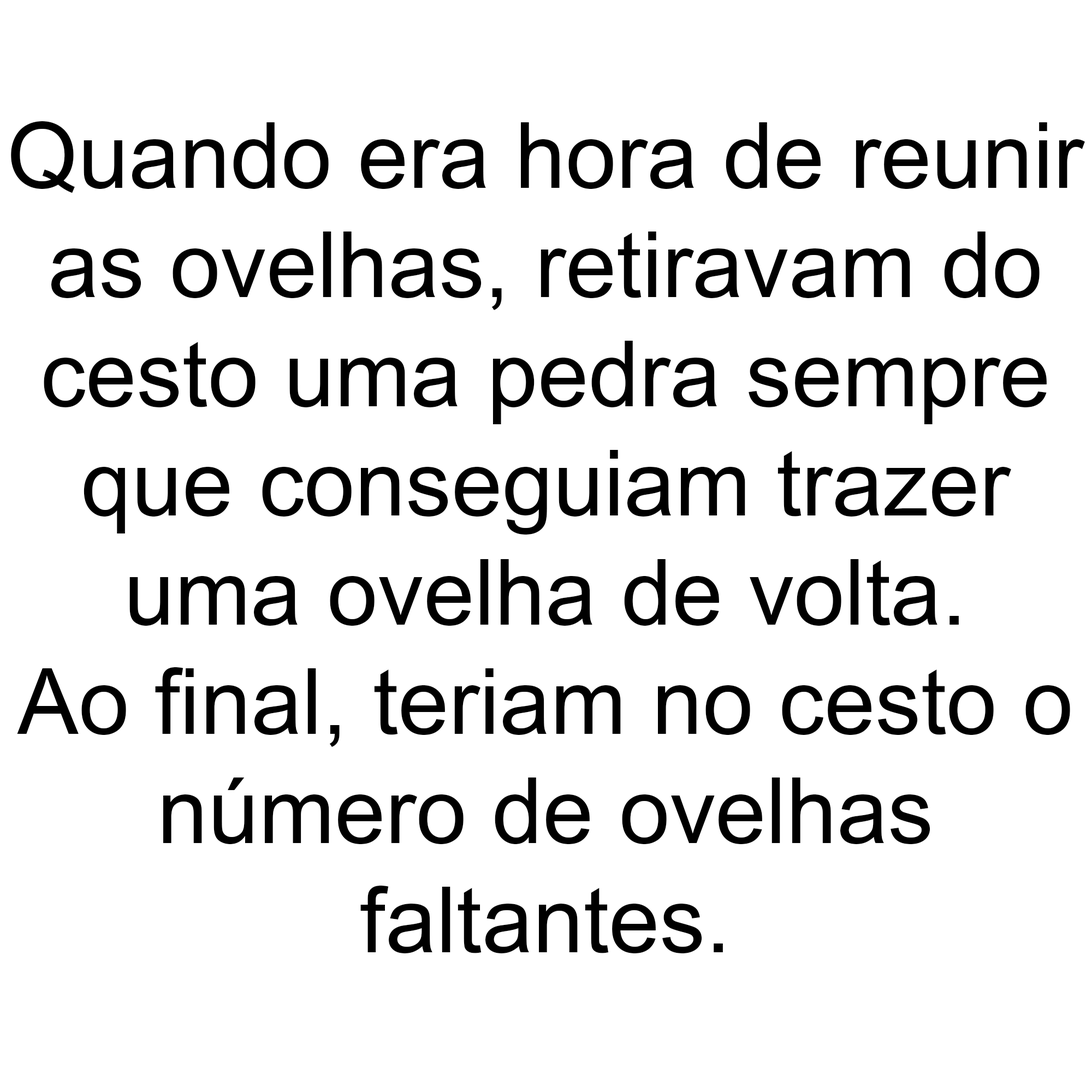
<style>
.page{position:relative;width:1092px;height:1092px;background:#ffffff}
.page>*{position:absolute;margin:0}
.t1{font:91px "ArialMT";color:#000000}
</style>
<div class="page">
<p class="t1" style="left:11px;top:121px;width:1074px;height:832px;text-align:center">Quando era hora de reunir<br>as ovelhas, retiravam do<br>cesto uma pedra sempre<br>que conseguiam trazer<br>uma ovelha de volta.<br>Ao final, teriam no cesto o<br>número de ovelhas<br>faltantes.</p>
</div>
